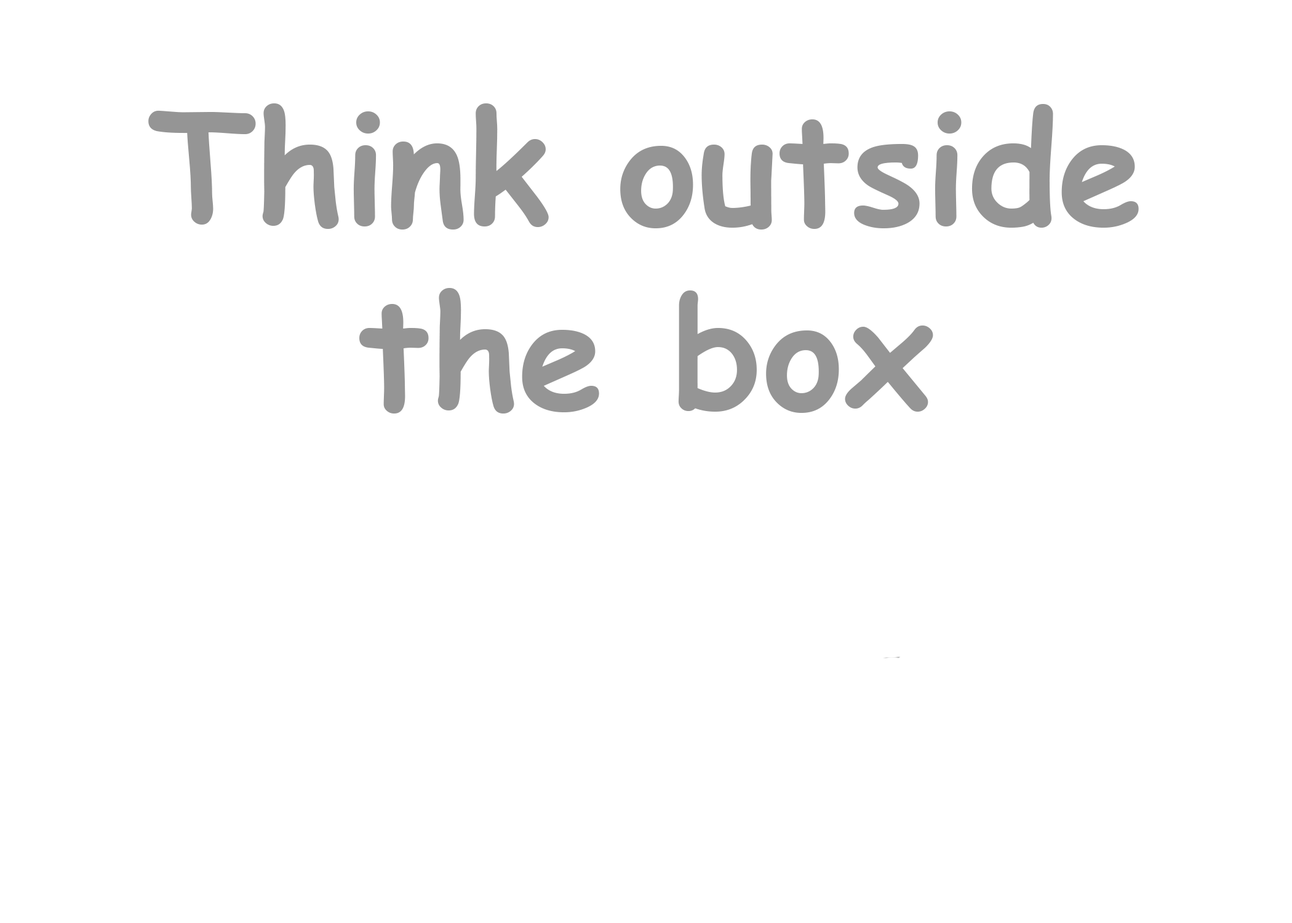
<style>
.page{position:relative;width:1292px;height:923px;background:#ffffff}
.page>*{position:absolute;margin:0}
.t1{font:153.8px "ComicSansMS-Bold";color:#959595}
</style>
<div class="page">
<p class="t1" style="left:148px;top:103px;width:991px;height:310px;text-align:center">Think outside the box</p>
</div>
